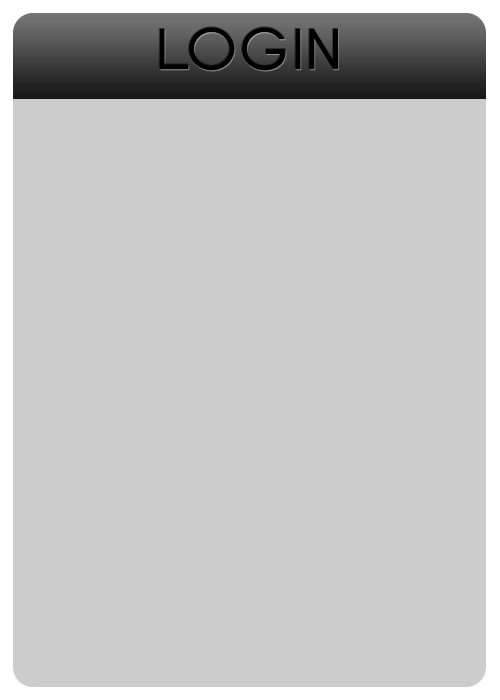
<style>
.page{position:relative;width:500px;height:700px;background:#cccccc}
.page>*{position:absolute;margin:0}
.t1{font:56.4px "Opificio";letter-spacing:0.055em;color:#010101;font-weight:bold;scale:1.06 1}
</style>
<div class="page">
<p class="t1" style="left:159px;top:27px;width:179px;height:44px">LOGIN</p>
</div>
